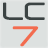
<style>
.page{position:relative;width:48px;height:48px;background:#dde1e0}
.page>*{position:absolute;margin:0}
.t1{font:51px "Neuropol";color:#3b4343}
.t2{font:57.4px "Neuropol";color:#f26c4f}
</style>
<div class="page">
<p class="t1" style="left:3px;top:2px;width:42px;height:18px">LC</p>
<p class="t2" style="left:12px;top:26px;width:27px;height:21px">7</p>
</div>
